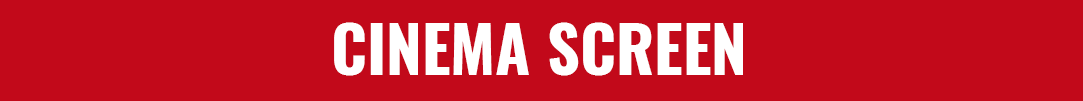
<style>
.page{position:relative;width:1083px;height:101px;background:#c2091a}
.page>*{position:absolute;margin:0}
.t1{font:64px "Oswald-Bold";color:#ffffff}
</style>
<div class="page">
<p class="t1" style="left:334px;top:22px;width:409px;height:54px">CINEMA SCREEN</p>
</div>
